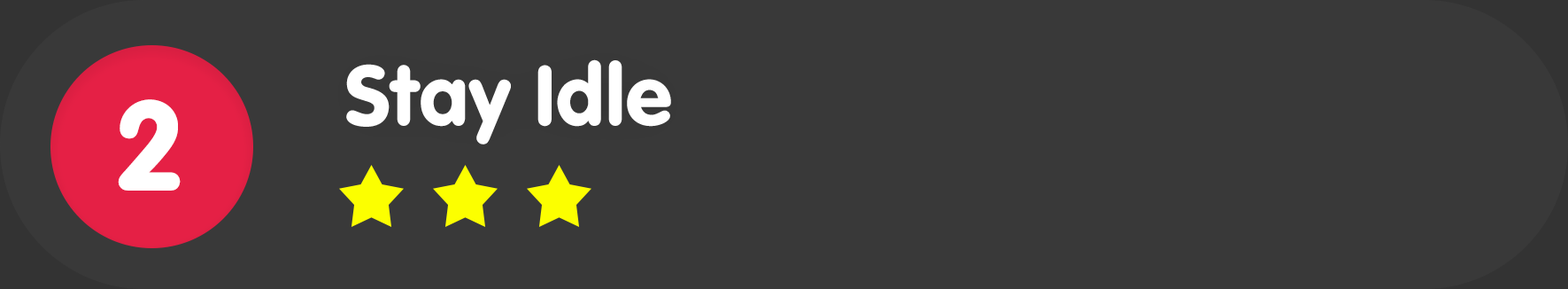
<style>
.page{position:relative;width:1568px;height:289px;background:#393939}
.page>*{position:absolute;margin:0}
.t1{font:88.5px "VAGRundschriftD";color:#ffffff}
.t2{font:132.8px "VAGRundschriftD";color:#ffffff}
</style>
<div class="page">
<p class="t1" style="left:346px;top:59px;width:325px;height:85px">Stay Idle</p>
<p class="t2" style="left:118px;top:99px;width:63px;height:91px">2</p>
</div>
